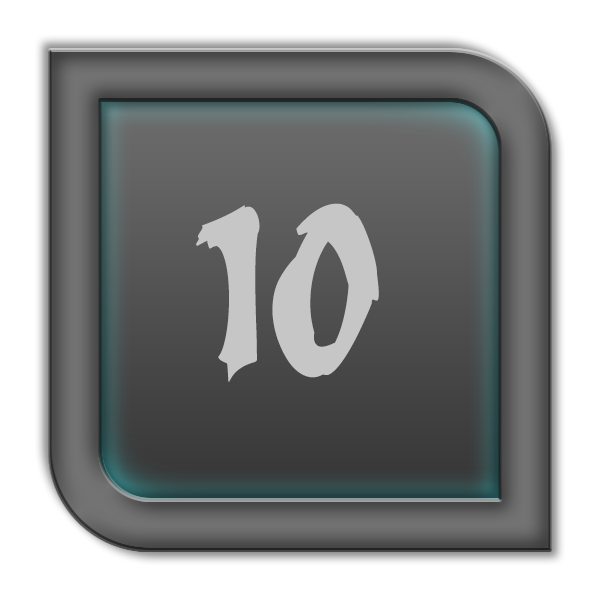
<style>
.page{position:relative;width:600px;height:600px;background:#ffffff}
.page>*{position:absolute;margin:0}
.t1{font:240px "TOXIA";color:#c6c6c6;scale:0.83 1}
</style>
<div class="page">
<p class="t1" style="left:196px;top:203px;width:183px;height:179px">10</p>
</div>
